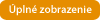
<style>
.page{position:relative;width:100px;height:20px;background:#e68d00}
.page>*{position:absolute;margin:0}
.t1{font:11px "MyriadPro-Semibold";color:#ffffff}
</style>
<div class="page">
<p class="t1" style="left:9px;top:4px;width:83px;height:12px">Úplné zobrazenie</p>
</div>
